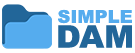
<style>
.page{position:relative;width:135px;height:53px;background:#ffffff}
.page>*{position:absolute;margin:0}
.t1{font:17.6px "Arial-Black";color:#55acee}
.t2{font:30.9px/24.7px "Arial-Black";color:#226699}
</style>
<div class="page">
<p class="t1" style="left:58px;top:9px;width:74px;height:39px;text-align:center">SIMPLE<br><span class="t2">DAM</span></p>
</div>
